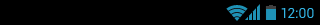
<style>
.page{position:relative;width:320px;height:25px;background:#000000}
.page>*{position:absolute;margin:0}
.t1{font:14px "Roboto-Regular";color:#33b5e5}
</style>
<div class="page">
<p class="t1" style="left:281px;top:8px;width:33px;height:10px">12:00</p>
</div>
